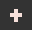
<style>
.page{position:relative;width:32px;height:30px;background:#333333}
.page>*{position:absolute;margin:0}
.t1{font:24px "Herald";color:#f6e0da}
</style>
<div class="page">
<p class="t1" style="left:10px;top:9px;width:12px;height:13px">+</p>
</div>
